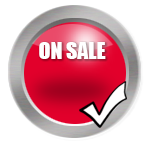
<style>
.page{position:relative;width:147px;height:143px;background:#ffffff}
.page>*{position:absolute;margin:0}
.t1{font:21.7px "Impact";color:#ffffff;font-variant:small-caps}
</style>
<div class="page">
<p class="t1" style="left:39px;top:42px;width:67px;height:17px">ON SALE</p>
</div>
